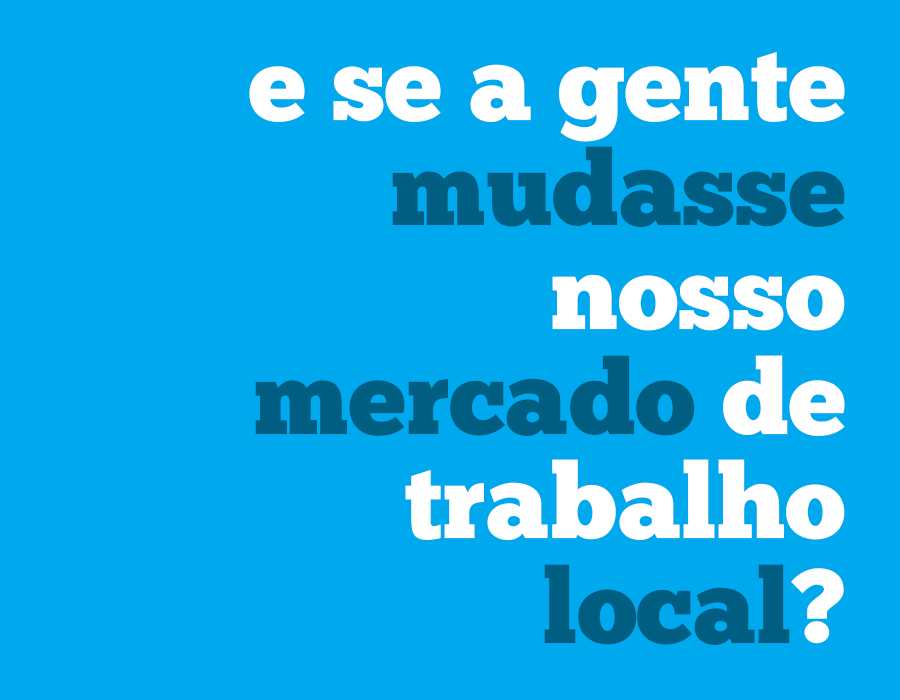
<style>
.page{position:relative;width:900px;height:700px;background:#00a9ee}
.page>*{position:absolute;margin:0}
.t1{font:104.5px/104.5px "ChunkFive-Roman";color:#ffffff}
.t2{font:104.5px/104.5px "ChunkFive-Roman";color:#005e83}
</style>
<div class="page">
<p class="t1" style="left:249px;top:52px;width:596px;height:593px;text-align:right">e se a gente<br><span class="t2">mudasse<br></span>nosso<br><span class="t2">mercado</span> de<br>trabalho<br><span class="t2">local</span>?</p>
</div>
